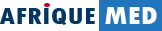
<style>
.page{position:relative;width:162px;height:31px;background:#ffffff}
.page>*{position:absolute;margin:0}
.t1{font:24px "TwCenMT-CondensedExtraBold";color:#003660;scale:1.23 1}
.t2{font:25.7px "TwCenMT-CondensedExtraBold";color:#ffffff;scale:1.23 1}
</style>
<div class="page">
<p class="t1" style="left:0px;top:7px;width:157px;height:18px">AFRIQUE <span class="t2">MED</span></p>
</div>
